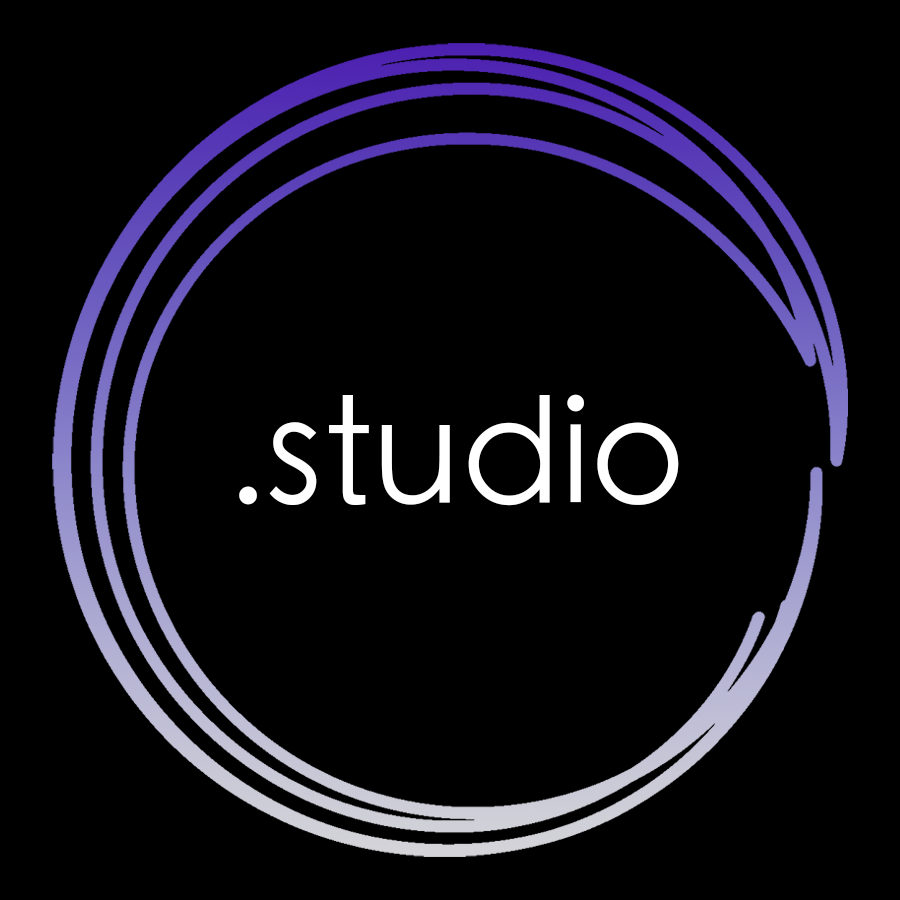
<style>
.page{position:relative;width:900px;height:900px;background:#000000}
.page>*{position:absolute;margin:0}
.t1{font:145.8px "STHeitiTC-Light";color:#ffffff}
</style>
<div class="page">
<p class="t1" style="left:239px;top:394px;width:440px;height:112px">.studio</p>
</div>
